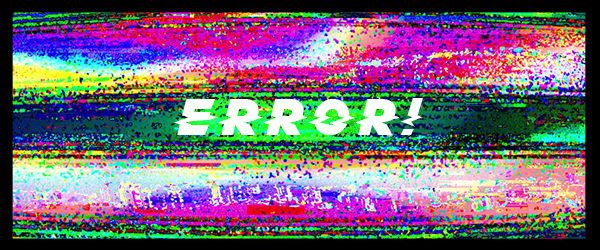
<style>
.page{position:relative;width:600px;height:250px}
.page>*{position:absolute;margin:0}
.t1{font:70px "PhelixBoomgartner-Regular";color:#ffffff}
</style>
<div class="page">
<p class="t1" style="left:174px;top:98px;width:249px;height:37px">ERROR!</p>
</div>
